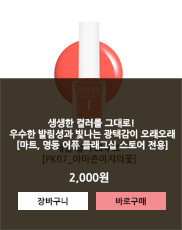
<style>
.page{position:relative;width:182px;height:230px;background:#3f372a}
.page>*{position:absolute;margin:0}
.t1{font:9.2px "NanumGothicBold";color:#fbfbfb}
.t2{font:9.2px "NanumGothicBold"}
.t3{font:11px "NanumGothicBold";color:#ffffff}
.t4{font:8.3px "NanumGothicBold"}
.t5{font:8.3px "NanumGothicBold";color:#171212}
.t6{font:8.3px "NanumGothicBold";color:#231b1b}
</style>
<div class="page">
<p class="t1" style="left:9px;top:118px;width:166px;height:32px;text-align:center">생생한 컬러를 그대로! <br>우수한 발림성과 빛나는 광택감이 오래오래<br>[마트, 명동 어퓨 플래그십 스토어 전용]</p>
<p class="t2" style="left:10px;top:118px;width:165px;height:21px;text-align:center">콧수염,별,피스 마크로<br>패셔너블한 네일을 완성하는 워터프리데칼</p>
<p class="t2" style="left:17px;top:118px;width:151px;height:32px;text-align:center">유리알처럼 투명한 광택과 <br>달콤한 바닐라 향취가 솔솔~ <br>[마트, 명동 어퓨 플래그십 스토어 전용]</p>
<p class="t2" style="left:17px;top:118px;width:151px;height:32px;text-align:center">숨길 수 없는 리얼 광택! <br>고광택&amp;고지속 베이스가 블링블링 <br>[마트, 명동 어퓨 플래그십 스토어 전용]</p>
<p class="t3" style="left:69px;top:172px;width:40px;height:12px">2,500원</p>
<p class="t3" style="left:69px;top:172px;width:40px;height:12px">2,500원</p>
<p class="t3" style="left:69px;top:172px;width:40px;height:12px">2,500원</p>
<p class="t3" style="left:69px;top:172px;width:40px;height:12px">2,500원</p>
<p class="t3" style="left:69px;top:172px;width:40px;height:12px">2,000원</p>
<p class="t3" style="left:69px;top:172px;width:40px;height:12px">2,000원</p>
<p class="t3" style="left:70px;top:172px;width:39px;height:12px">1,800원</p>
<p class="t3" style="left:70px;top:172px;width:39px;height:12px">1,800원</p>
<p class="t4" style="left:36px;top:197px;width:31px;height:9px">장바구니</p>
<p class="t4" style="left:36px;top:197px;width:31px;height:9px">장바구니</p>
<p class="t4" style="left:36px;top:197px;width:31px;height:9px">장바구니</p>
<p class="t5" style="left:37px;top:197px;width:31px;height:9px">장바구니</p>
<p class="t6" style="left:115px;top:197px;width:31px;height:9px">바로구매</p>
</div>
